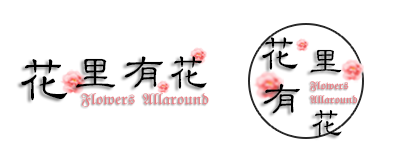
<style>
.page{position:relative;width:397px;height:159px;background:#ffffff}
.page>*{position:absolute;margin:0}
.t1{font:39.9px "HGLB_CNKI";letter-spacing:0.08em;color:#000000}
.t2{font:30.7px "HGLB_CNKI";letter-spacing:0.08em;color:#000000;scale:1.13 1}
.t3{font:50.5px "HGLB_CNKI";letter-spacing:0.08em;color:#000000;scale:1.06 1}
.t4{font:39px "HGLB_CNKI";letter-spacing:0.08em;color:#000000;scale:1.13 1}
.t5{font:41.1px "HGLB_CNKI";letter-spacing:0.08em;color:#000000;scale:1.07 1}
.t6{font:39px "HGLB_CNKI";letter-spacing:0.08em;color:#000000;scale:1.07 1}
.t7{font:10px "HGBD_CNKI";color:#ea7b82}
.t8{font:14px "HGBD_CNKI";color:#ea7b82}
.t9{font:32.5px "HGLB_CNKI";letter-spacing:0.08em;color:#000000}
</style>
<div class="page">
<p class="t1" style="left:262px;top:37px;width:36px;height:33px">花</p>
<p class="t2" style="left:310px;top:49px;width:32px;height:24px">里</p>
<p class="t3" style="left:21px;top:59px;width:47px;height:42px">花</p>
<p class="t4" style="left:76px;top:58px;width:40px;height:30px">里</p>
<p class="t5" style="left:124px;top:56px;width:39px;height:32px">有</p>
<p class="t1" style="left:171px;top:56px;width:36px;height:33px">花</p>
<p class="t6" style="left:263px;top:83px;width:37px;height:31px">有</p>
<p class="t7" style="left:310px;top:81px;width:39px;height:11px">Flowers</p>
<p class="t8" style="left:81px;top:93px;width:128px;height:14px">Flowers  Allaround</p>
<p class="t7" style="left:310px;top:95px;width:48px;height:9px">Allaround</p>
<p class="t9" style="left:312px;top:109px;width:30px;height:28px">花</p>
</div>
